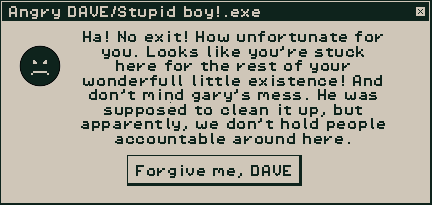
<style>
.page{position:relative;width:432px;height:205px;background:#cfc6b8}
.page>*{position:absolute;margin:0}
.t1{font:12.1px "PixelOperator8";color:#cfc6b8}
.t2{font:12.1px "PixelOperator8";color:#0e231c}
</style>
<div class="page">
<p class="t1" style="left:9px;top:6px;width:251px;height:13px">Angry DAVE/Stupid boy!.exe</p>
<p class="t2" style="left:81px;top:31px;width:304px;height:113px;text-align:center">Ha! No exit! How unfortunate for you. Looks like you’re stuck here for the rest of your wonderfull little existence! And don’t mind gary’s mess. He was supposed to clean it up, but apparently, we don’t hold people accountable around here.</p>
<p class="t2" style="left:136px;top:165px;width:155px;height:13px">Forgive me, DAVE</p>
</div>
